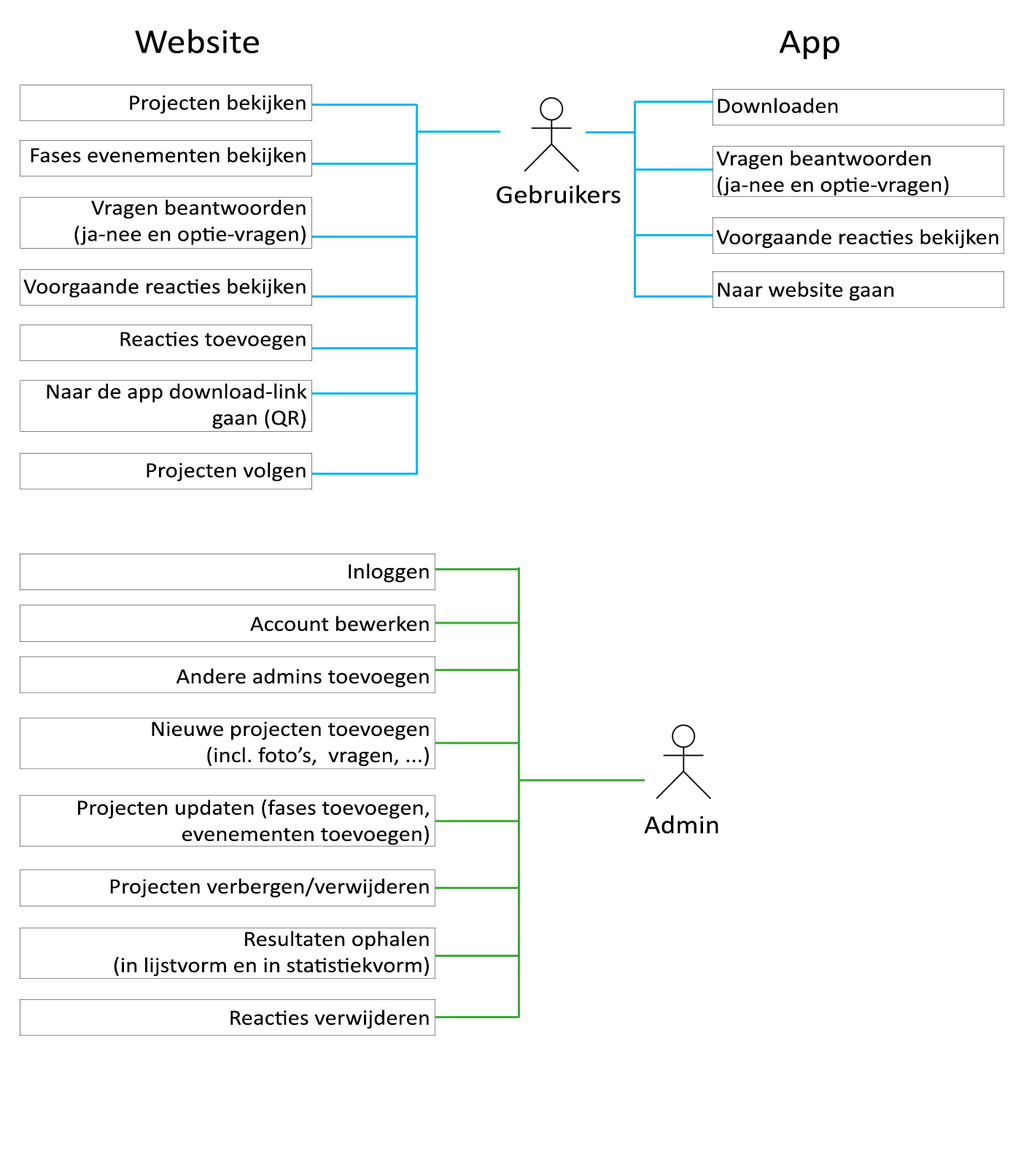
<style>
.page{position:relative;width:1021px;height:1167px;background:#ffffff}
.page>*{position:absolute;margin:0}
.t1{font:35px "Calibri";color:#000000;scale:1.09 1}
.t2{font:21.9px "Calibri";color:#000000;scale:1.09 1}
.t3{font:26.3px "Calibri";color:#000000;scale:1.09 1}
</style>
<div class="page">
<p class="t1" style="left:135px;top:28px;width:124px;height:25px">Website</p>
<p class="t1" style="left:779px;top:31px;width:61px;height:29px">App</p>
<p class="t2" style="left:23px;top:94px;width:284px;height:388px;text-align:right">Projecten bekijken<br><br>Fases evenementen bekijken<br><br>Vragen beantwoorden<br>(ja-nee en optie-vragen)<br><br>Voorgaande reacties bekijken<br><br>Reacties toevoegen<br><br>Naar de app download-link gaan (QR)<br><br>Projecten volgen</p>
<p class="t2" style="left:716px;top:98px;width:283px;height:203px">Downloaden<br><br>Vragen beantwoorden<br>(ja-nee en optie-vragen)<br><br>Voorgaande reacties bekijken<br><br>Naar website gaan</p>
<p class="t3" style="left:497px;top:185px;width:124px;height:19px">Gebruikers</p>
<p class="t2" style="left:78px;top:563px;width:351px;height:466px">Inloggen<br><br>Account bewerken<br><br>Andere admins toevoegen<br><br>Nieuwe projecten toevoegen <br>(incl. foto’s,  vragen, ...)<br><br>Projecten updaten (fases toevoegen, <br>evenementen toevoegen)<br><br>Projecten verbergen/verwijderen<br><br>Resultaten ophalen <br>(in lijstvorm en in statistiekvorm)<br><br>Reacties verwijderen</p>
<p class="t3" style="left:644px;top:815px;width:75px;height:19px">Admin</p>
</div>
